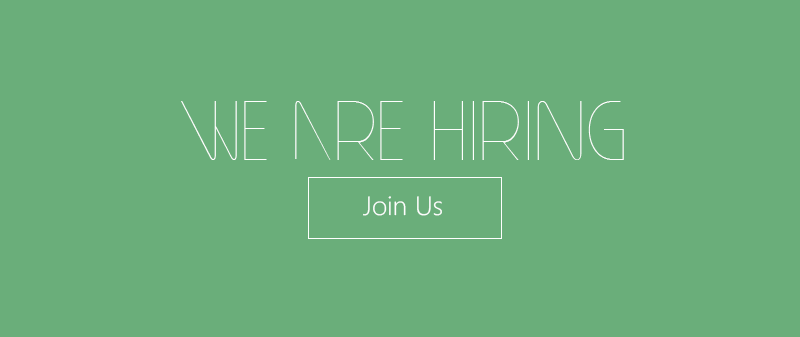
<style>
.page{position:relative;width:800px;height:337px;background:#6aae7a}
.page>*{position:absolute;margin:0}
.t1{font:80px "PlainCred1978";color:#ffffff}
.t2{font:26.5px "SegoeUI-Light";color:#ffffff}
</style>
<div class="page">
<p class="t1" style="left:181px;top:101px;width:443px;height:59px">We are hiring</p>
<p class="t2" style="left:363px;top:196px;width:79px;height:20px">Join Us</p>
</div>
